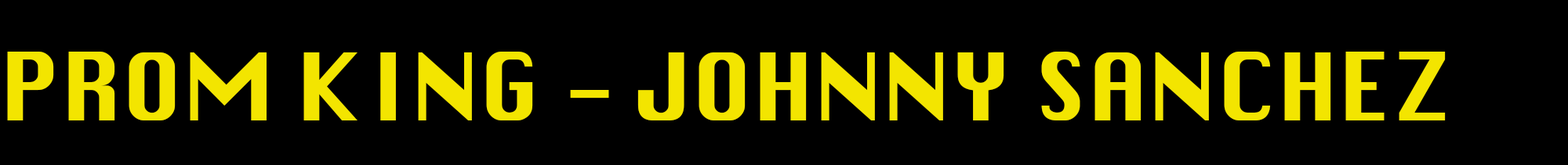
<style>
.page{position:relative;width:1568px;height:165px;background:#000000}
.page>*{position:absolute;margin:0}
.t1{font:156.8px "Krungthep";color:#f3e500}
</style>
<div class="page">
<p class="t1" style="left:7px;top:52px;width:1439px;height:69px">PROM KING - JOHNNY SANCHEZ</p>
</div>
